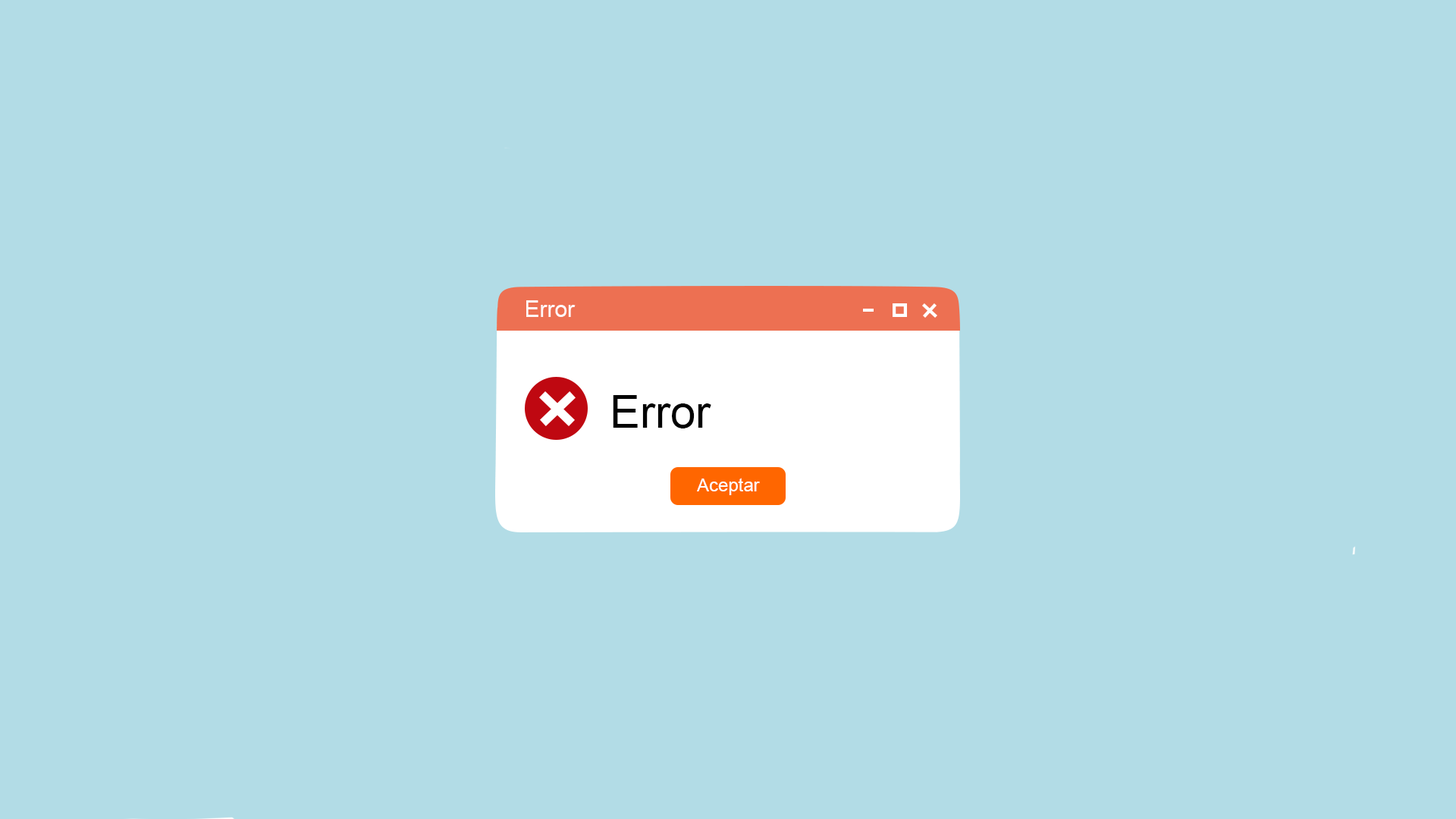
<style>
.page{position:relative;width:1456px;height:819px;background:#b2dce6}
.page>*{position:absolute;margin:0}
.t1{font:22.7px "ArialMT";color:#fff8f8}
.t2{font:45.5px "ArialMT";color:#000000}
</style>
<div class="page">
<p class="t1" style="left:526px;top:300px;width:50px;height:17px">Error</p>
<p class="t2" style="left:613px;top:395px;width:98px;height:33px">Error</p>
</div>
